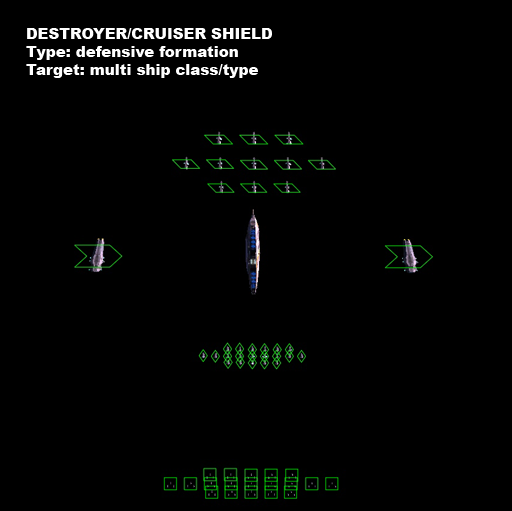
<style>
.page{position:relative;width:512px;height:511px;background:#000000}
.page>*{position:absolute;margin:0}
.t1{font:15px "Arial-Black";color:#ffffff}
</style>
<div class="page">
<p class="t1" style="left:26px;top:28px;width:246px;height:50px">DESTROYER/CRUISER SHIELD<br>Type: defensive formation<br>Target: multi ship class/type</p>
</div>
